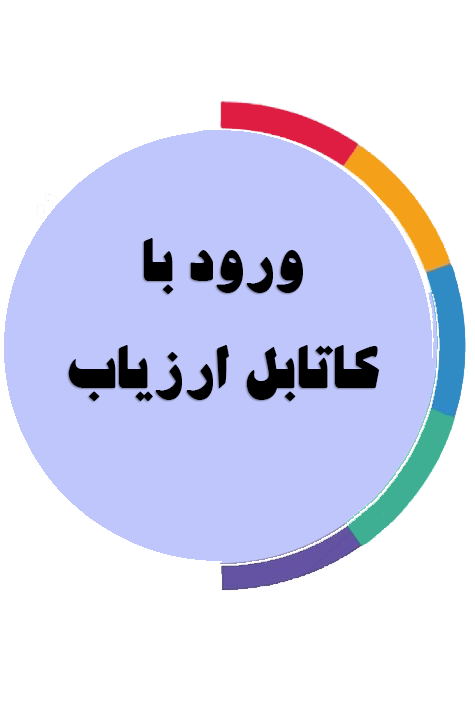
<style>
.page{position:relative;width:475px;height:707px;background:#ffffff}
.page>*{position:absolute;margin:0}
.t1{font:59.5px/107px "BJadidBold";color:#000000}
</style>
<div class="page">
<p class="t1" style="left:68px;top:238px;width:312px;height:163px;text-align:center">ورود با<br>کاتابل ارزیاب</p>
</div>
